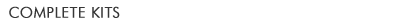
<style>
.page{position:relative;width:400px;height:24px;background:#ffffff}
.page>*{position:absolute;margin:0}
.t1{font:14.7px "FuturaBT-Light";letter-spacing:0.025em;color:#363636;text-transform:uppercase;font-weight:bold}
</style>
<div class="page">
<p class="t1" style="left:9px;top:6px;width:111px;height:12px">COMPLETE KITS</p>
</div>
